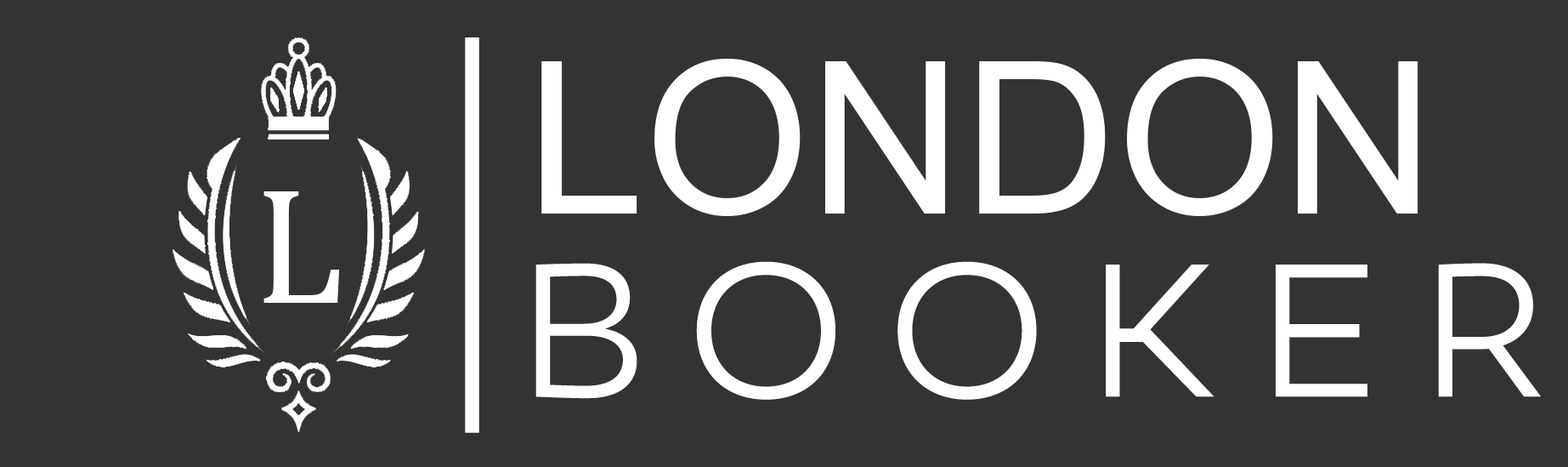
<style>
.page{position:relative;width:1568px;height:467px;background:#333333}
.page>*{position:absolute;margin:0}
.t1{font:212.5px "ArialMT";color:#ffffff}
.t2{font:167.2px "Cambria";color:#ffffff}
</style>
<div class="page">
<p class="t1" style="left:541px;top:59px;width:877px;height:157px">LONDON</p>
<p class="t2" style="left:263px;top:191px;width:77px;height:112px">L</p>
</div>
